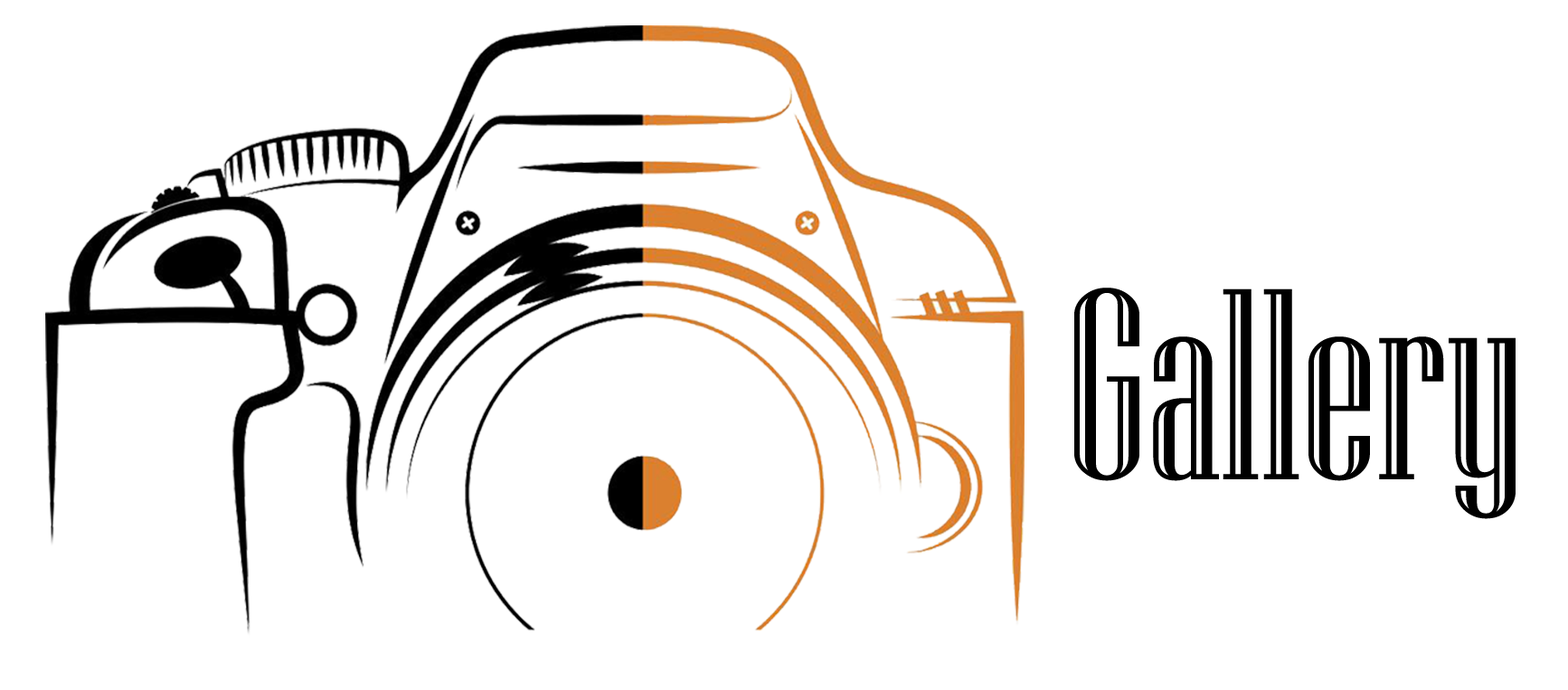
<style>
.page{position:relative;width:1568px;height:690px;background:#ffffff}
.page>*{position:absolute;margin:0}
.t1{font:271.3px "NiagaraEngraved-Reg";color:#000000}
</style>
<div class="page">
<p class="t1" style="left:1074px;top:288px;width:442px;height:231px">Gallery</p>
</div>
